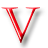
<style>
.page{position:relative;width:48px;height:48px;background:#ffffff}
.page>*{position:absolute;margin:0}
.t1{font:48px "Castellar"}
</style>
<div class="page">
<p class="t1" style="left:1px;top:7px;width:39px;height:36px">V</p>
</div>
